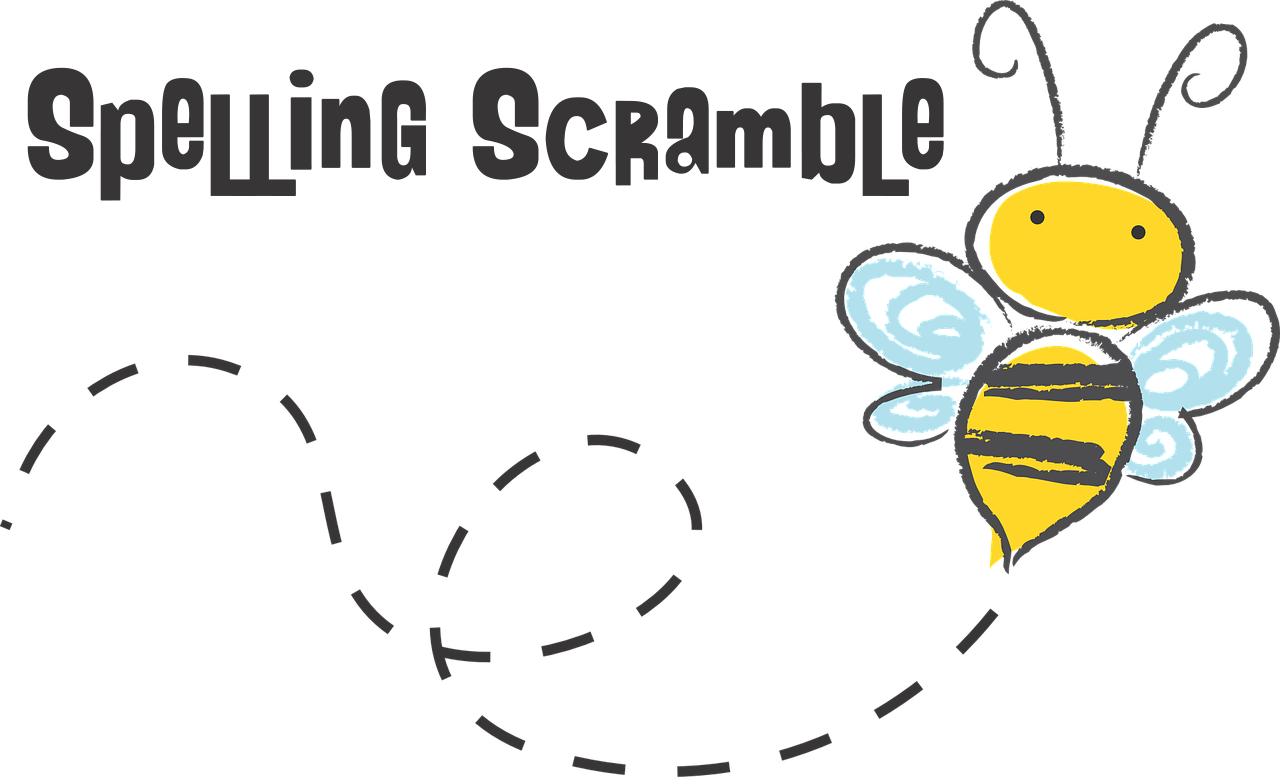
<style>
.page{position:relative;width:1280px;height:777px;background:#ffffff}
.page>*{position:absolute;margin:0}
.t1{font:122.2px "AHDN";color:#373535;font-weight:bold}
</style>
<div class="page">
<p class="t1" style="left:27px;top:67px;width:917px;height:134px">Spelling Scramble</p>
</div>
